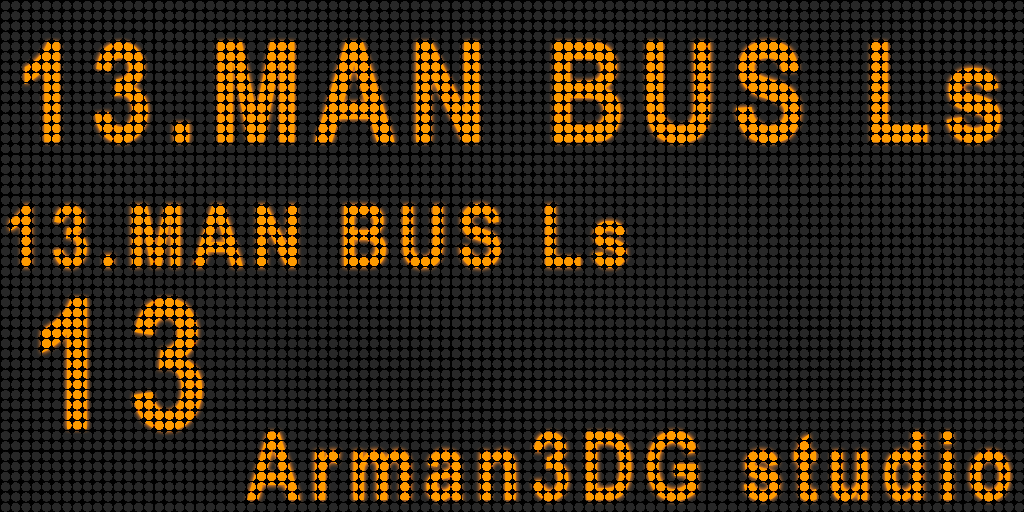
<style>
.page{position:relative;width:1024px;height:512px;background:#272727}
.page>*{position:absolute;margin:0}
.t1{font:140px "ArialNarrow-Bold";letter-spacing:0.1em;color:#ff9b00;scale:0.96 1}
.t2{font:85.9px "ArialNarrow-Bold";letter-spacing:0.1em;color:#ff9b00}
.t3{font:182.9px "ArialNarrow-Bold";letter-spacing:0.1em;color:#ff9b00;scale:0.96 1}
.t4{font:95.3px "ArialNarrow-Bold";letter-spacing:0.1em;color:#ff9b00;scale:0.96 1}
</style>
<div class="page">
<p class="t1" style="left:24px;top:41px;width:977px;height:102px">13.MAN BUS Ls</p>
<p class="t2" style="left:9px;top:204px;width:618px;height:64px">13.MAN BUS Ls</p>
<p class="t3" style="left:41px;top:298px;width:162px;height:133px">13</p>
<p class="t4" style="left:247px;top:431px;width:763px;height:70px">Arman3DG studio</p>
</div>
